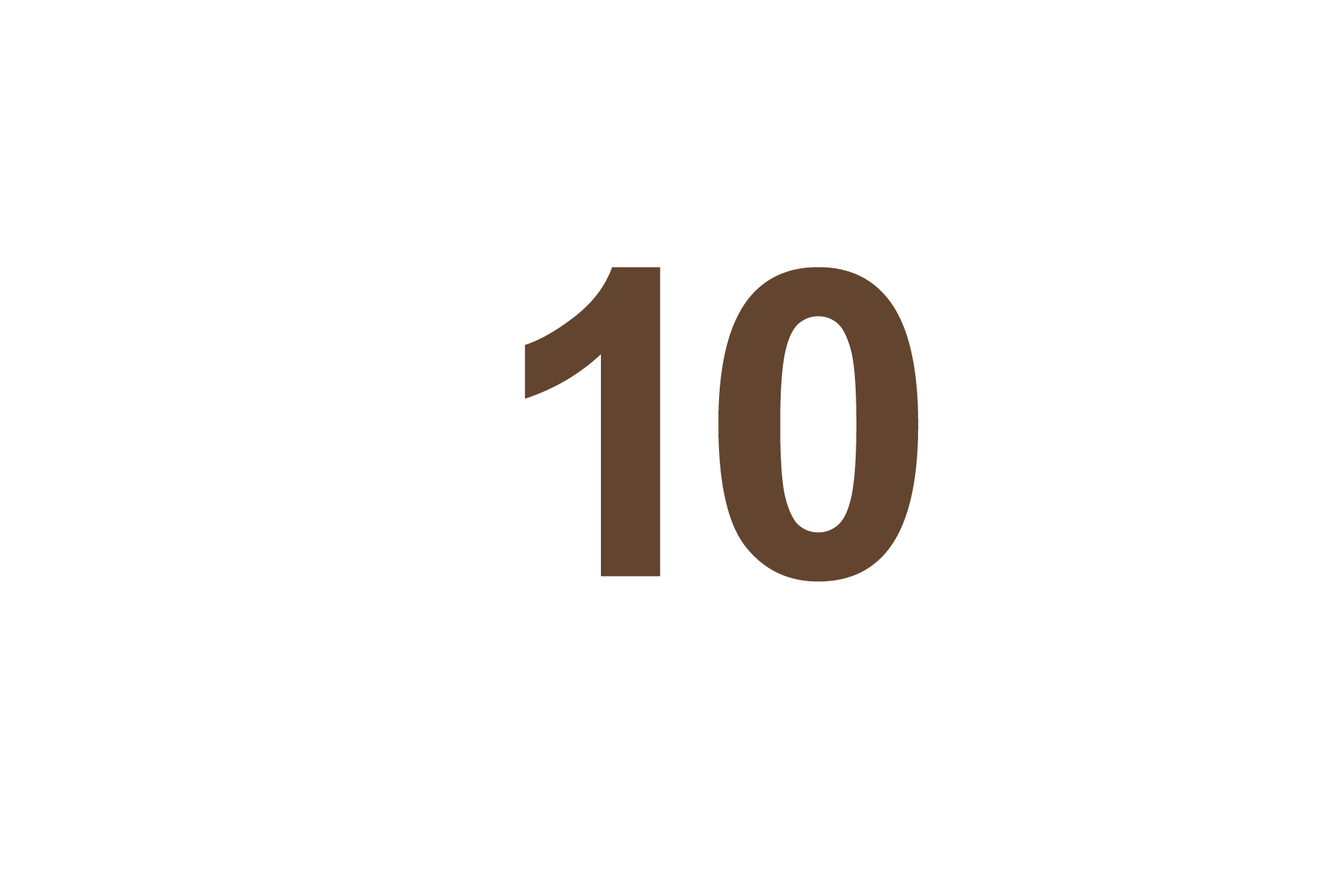
<style>
.page{position:relative;width:1337px;height:892px;background:#ffffff}
.page>*{position:absolute;margin:0}
.t1{font:429.6px "Arial-BoldMT";color:#63442f}
</style>
<div class="page">
<p class="t1" style="left:525px;top:267px;width:394px;height:315px">10</p>
</div>
